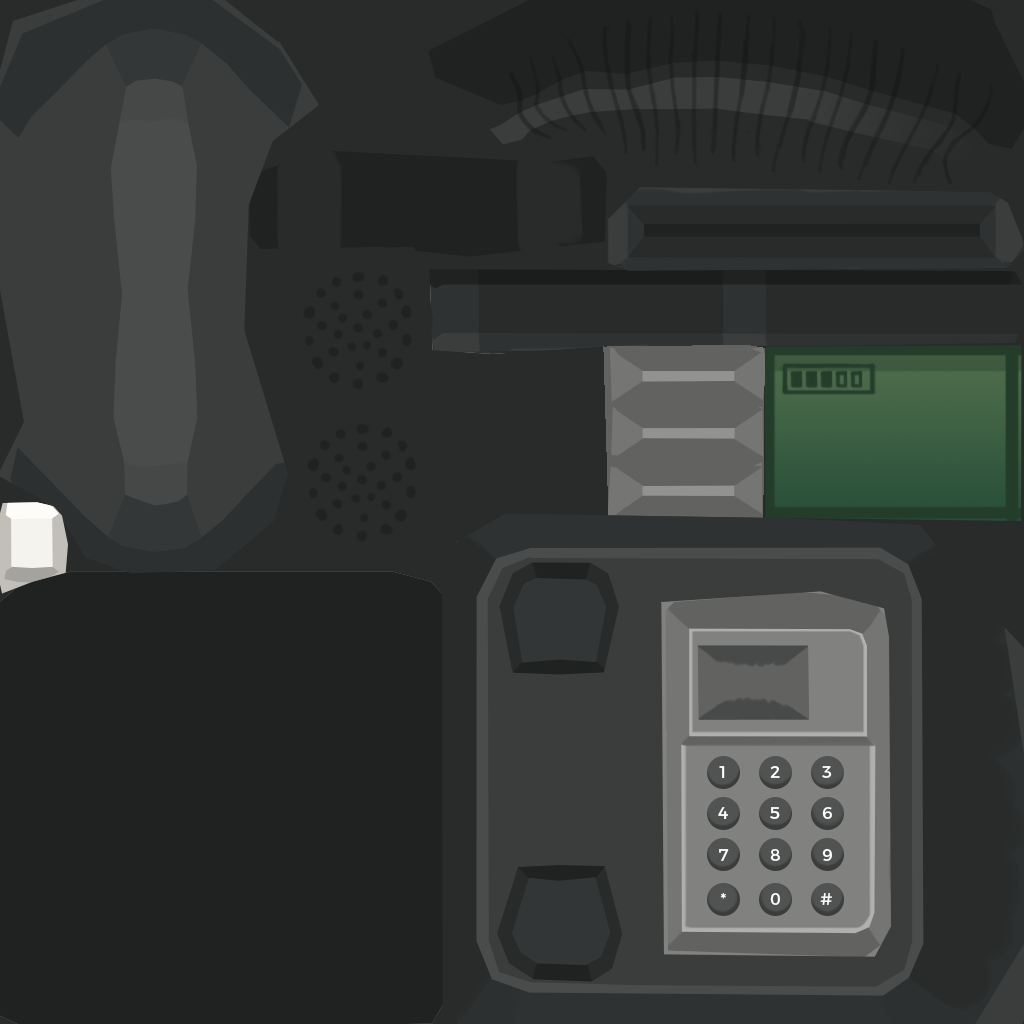
<style>
.page{position:relative;width:1024px;height:1024px;background:#202222}
.page>*{position:absolute;margin:0}
.t1{font:16.7px "Montserrat-Regular";color:#ffffff}
</style>
<div class="page">
<p class="t1" style="left:719px;top:766px;width:6px;height:12px">1</p>
<p class="t1" style="left:770px;top:766px;width:10px;height:12px">2</p>
<p class="t1" style="left:822px;top:766px;width:10px;height:12px">3</p>
<p class="t1" style="left:718px;top:807px;width:10px;height:12px">4</p>
<p class="t1" style="left:770px;top:807px;width:10px;height:12px">5</p>
<p class="t1" style="left:822px;top:807px;width:10px;height:12px">6</p>
<p class="t1" style="left:719px;top:849px;width:10px;height:12px">7</p>
<p class="t1" style="left:770px;top:849px;width:10px;height:12px">8</p>
<p class="t1" style="left:822px;top:849px;width:10px;height:12px">9</p>
<p class="t1" style="left:720px;top:893px;width:6px;height:6px">*</p>
<p class="t1" style="left:770px;top:893px;width:10px;height:12px">0</p>
<p class="t1" style="left:820px;top:893px;width:12px;height:12px">#</p>
</div>
